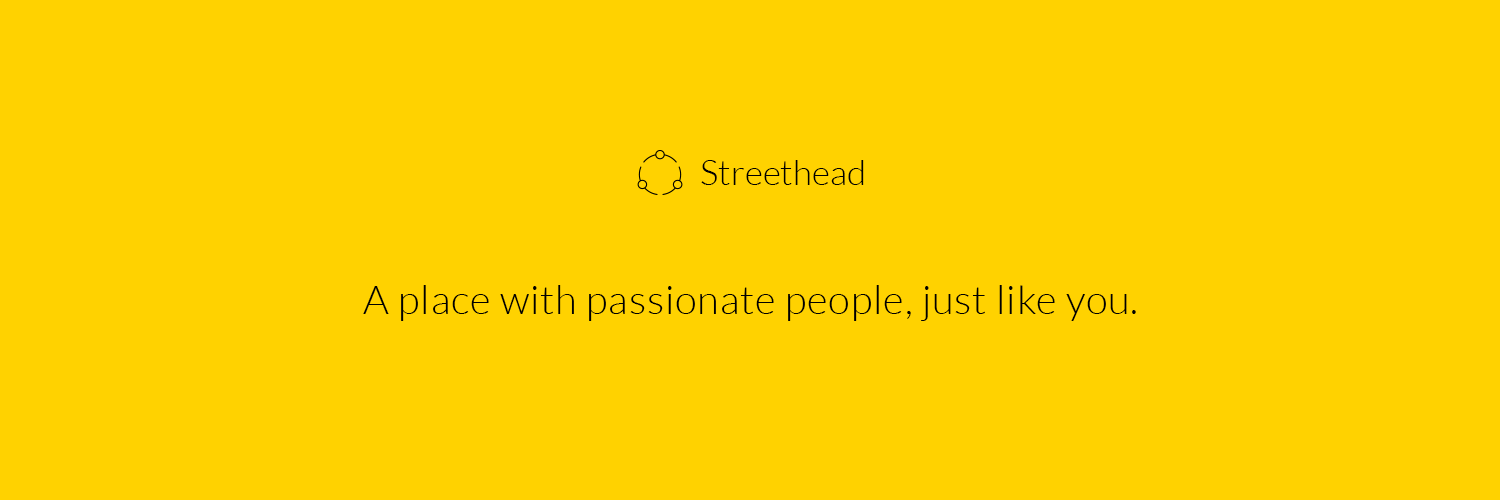
<style>
.page{position:relative;width:1500px;height:500px;background:#ffd200}
.page>*{position:absolute;margin:0}
.t1{font:35px "Lato-Light";color:#000000}
.t2{font:40px "Lato-Light";letter-spacing:0.02em;color:#000000}
</style>
<div class="page">
<p class="t1" style="left:701px;top:160px;width:163px;height:25px">Streethead</p>
<p class="t2" style="left:363px;top:285px;width:773px;height:36px">A place with passionate people, just like you.</p>
</div>
